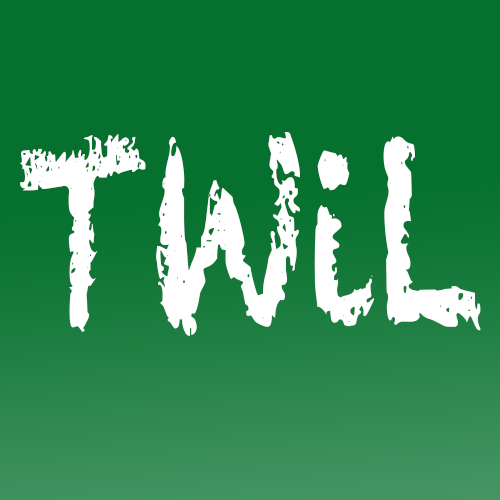
<style>
.page{position:relative;width:500px;height:500px;background:#06712e}
.page>*{position:absolute;margin:0}
.t1{font:241.8px "Chalkduster";color:#ffffff;scale:0.72 1}
</style>
<div class="page">
<p class="t1" style="left:20px;top:132px;width:461px;height:204px">TWiL</p>
</div>
